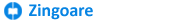
<style>
.page{position:relative;width:181px;height:23px;background:#ffffff}
.page>*{position:absolute;margin:0}
.t1{font:18px "Calibri-Bold";color:#0784e3}
</style>
<div class="page">
<p class="t1" style="left:29px;top:4px;width:64px;height:16px">Zingoare</p>
</div>
